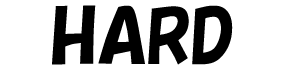
<style>
.page{position:relative;width:284px;height:72px;background:#ffffff}
.page>*{position:absolute;margin:0}
.t1{font:72px "HGPSoeiKakupoptai";color:#000000}
</style>
<div class="page">
<p class="t1" style="left:52px;top:5px;width:181px;height:60px">HARD</p>
</div>
